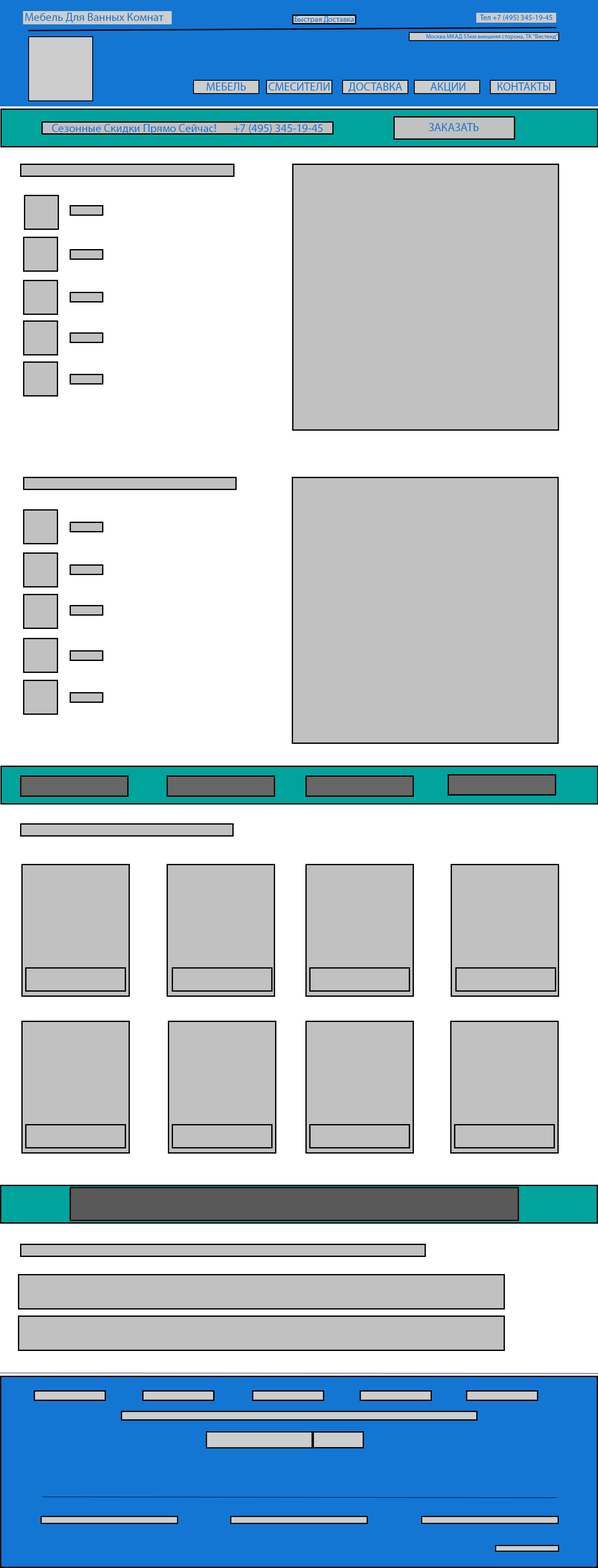
<style>
.page{position:relative;width:598px;height:1568px;background:#ffffff}
.page>*{position:absolute;margin:0}
.t1{font:11.5px "MyriadPro-Regular";color:#1376d3}
.t2{font:7.7px "MyriadPro-Regular";color:#1376d3}
.t3{font:6px "MyriadPro-Regular";color:#1376d3}
</style>
<div class="page">
<p class="t1" style="left:25px;top:13px;width:139px;height:10px">Мебель Для Ванных Комнат</p>
<p class="t2" style="left:295px;top:16px;width:59px;height:7px">Быстрая Доставка</p>
<p class="t2" style="left:480px;top:15px;width:72px;height:6px">Тел +7 (495) 345-19-45</p>
<p class="t3" style="left:426px;top:34px;width:132px;height:6px">Москва МКАД 55км внешняя сторона, ТК "Вестенд"</p>
<p class="t1" style="left:207px;top:82px;width:39px;height:9px">МЕБЕЛЬ</p>
<p class="t1" style="left:269px;top:82px;width:61px;height:9px">СМЕСИТЕЛИ</p>
<p class="t1" style="left:349px;top:82px;width:53px;height:11px">ДОСТАВКА</p>
<p class="t1" style="left:430px;top:82px;width:36px;height:11px">АКЦИИ</p>
<p class="t1" style="left:498px;top:82px;width:52px;height:9px">КОНТАКТЫ</p>
<p class="t1" style="left:52px;top:124px;width:271px;height:10px">Сезонные Скидки Прямо Сейчас!   +7 (495) 345-19-45</p>
<p class="t1" style="left:429px;top:123px;width:50px;height:8px">ЗАКАЗАТЬ</p>
</div>
